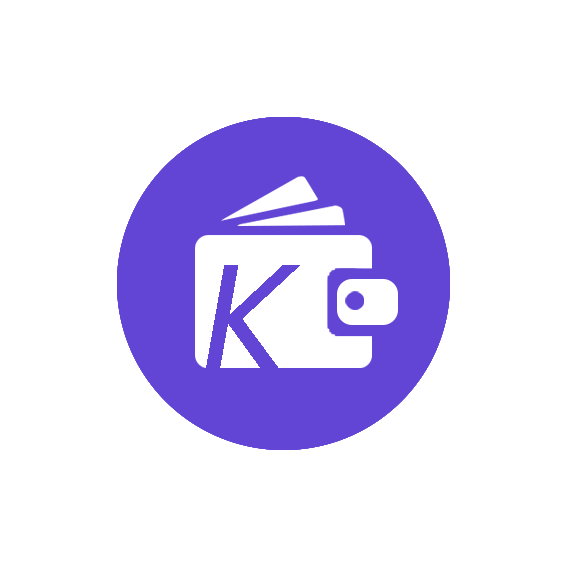
<style>
.page{position:relative;width:566px;height:566px;background:#ffffff}
.page>*{position:absolute;margin:0}
.t1{font:155.6px "Poppins-Italic";letter-spacing:-0.02em;color:#6245d5}
</style>
<div class="page">
<p class="t1" style="left:205px;top:265px;width:95px;height:108px">K</p>
</div>
